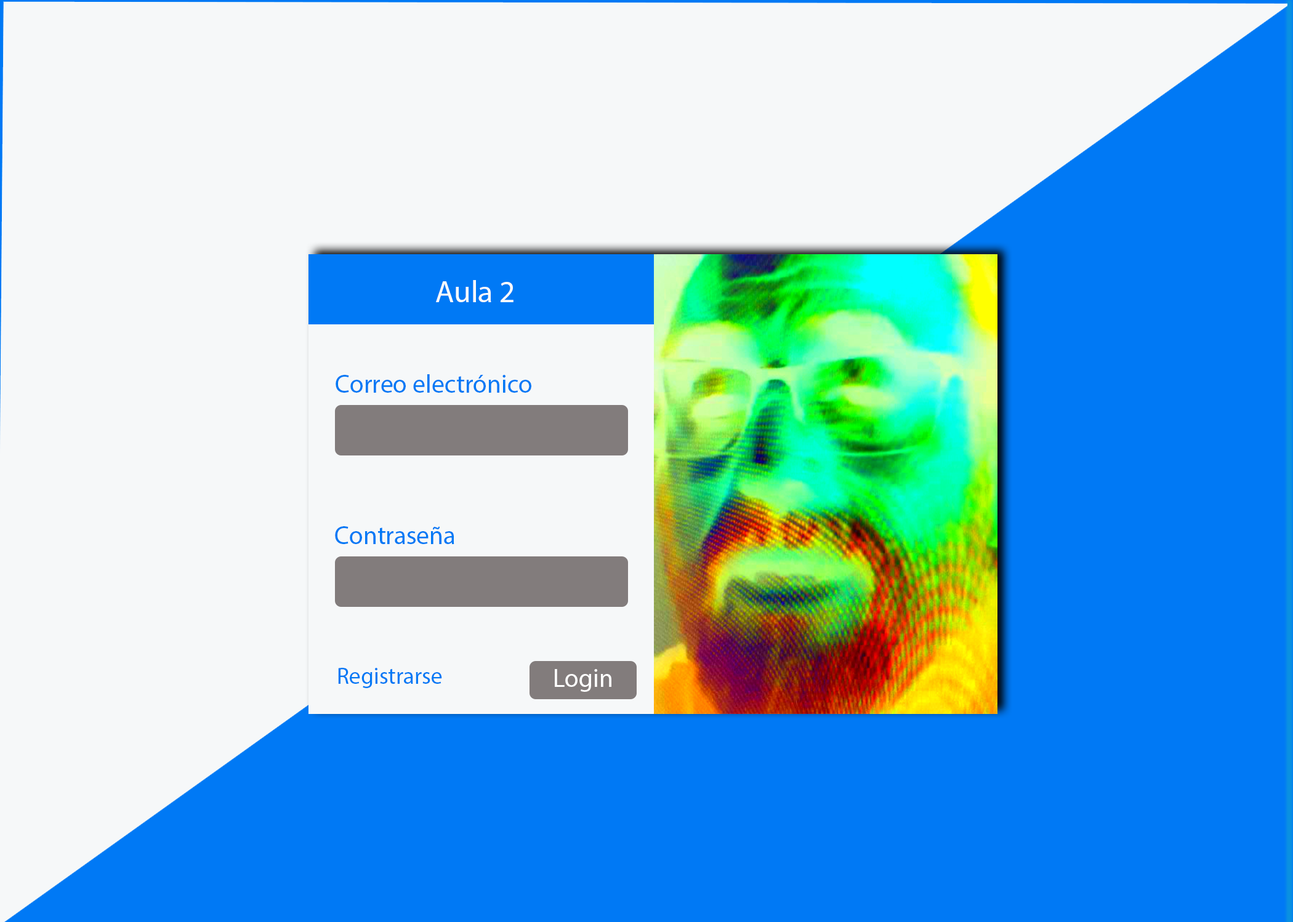
<style>
.page{position:relative;width:1293px;height:922px;background:#f6f8f9}
.page>*{position:absolute;margin:0}
.t1{font:30.8px "MyriadPro-Regular";color:#fbfbfb}
.t2{font:25.7px "MyriadPro-Regular";color:#0079f5}
.t3{font:23.1px "MyriadPro-Regular";color:#0079f5}
.t4{font:25.7px "MyriadPro-Regular";color:#ffffff}
</style>
<div class="page">
<p class="t1" style="left:436px;top:280px;width:77px;height:22px">Aula 2</p>
<p class="t2" style="left:336px;top:374px;width:195px;height:19px">Correo electrónico</p>
<p class="t2" style="left:335px;top:526px;width:119px;height:18px">Contraseña</p>
<p class="t3" style="left:338px;top:668px;width:104px;height:20px">Registrarse</p>
<p class="t4" style="left:555px;top:669px;width:56px;height:23px">Login</p>
</div>
